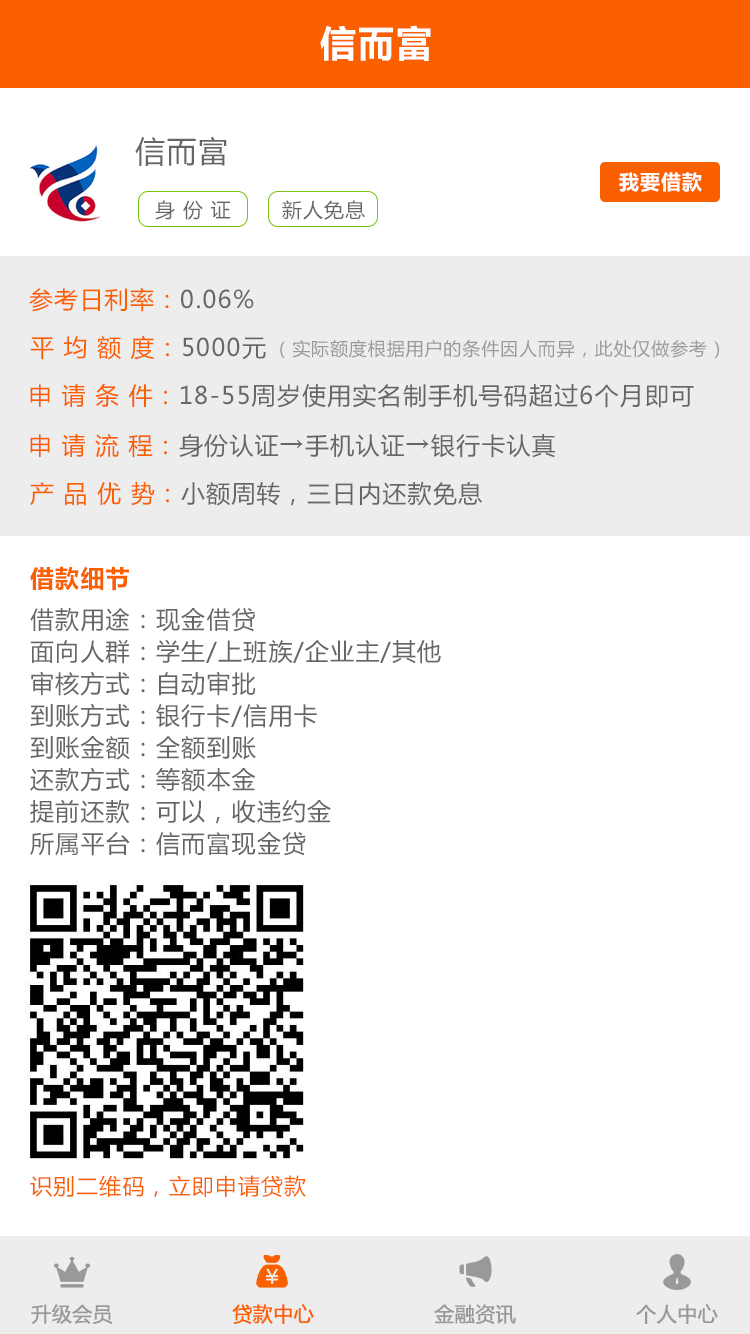
<style>
.page{position:relative;width:750px;height:1334px;background:#ffffff}
.page>*{position:absolute;margin:0}
.t1{font:36px "MicrosoftYaHei-Bold";letter-spacing:0.05em;color:#ffffff}
.t2{font:30px "MicrosoftYaHei";letter-spacing:0.05em;color:#666666}
.t3{font:20px "MicrosoftYaHei-Bold";letter-spacing:0.05em;color:#ffffff}
.t4{font:20px "MicrosoftYaHei";letter-spacing:0.05em;color:#666666}
.t5{font:24px "MicrosoftYaHei";letter-spacing:0.05em;color:#fb6000}
.t6{font:24px "MicrosoftYaHei";letter-spacing:0.05em;color:#666666}
.t7{font:18px "MicrosoftYaHei";letter-spacing:0.05em;color:#999999}
.t8{font:24px "MicrosoftYaHei-Bold";letter-spacing:0.05em;color:#fb6000}
.t9{font:24px/32px "MicrosoftYaHei";letter-spacing:0.05em;color:#666666}
.t10{font:22px "MicrosoftYaHei";letter-spacing:0.05em;color:#fb6000}
.t11{font:20px "MicrosoftYaHei";color:#999999;font-weight:bold}
.t12{font:20px "MicrosoftYaHei";color:#fb6000;font-weight:bold}
</style>
<div class="page">
<p class="t1" style="left:320px;top:25px;width:111px;height:36px">信而富</p>
<p class="t2" style="left:135px;top:136px;width:92px;height:30px">信而富</p>
<p class="t3" style="left:619px;top:172px;width:83px;height:20px">我要借款</p>
<p class="t4" style="left:155px;top:200px;width:76px;height:20px">身 份 证</p>
<p class="t4" style="left:282px;top:200px;width:83px;height:20px">新人免息</p>
<p class="t5" style="left:29px;top:287px;width:225px;height:25px">参考日利率：<span class="t6">0.06%</span></p>
<p class="t5" style="left:30px;top:335px;width:236px;height:25px">平 均 额 度：<span class="t6">5000元</span></p>
<p class="t7" style="left:280px;top:339px;width:439px;height:20px">( 实际额度根据用户的条件因人而异，此处仅做参考 )</p>
<p class="t6" style="left:30px;top:384px;width:664px;height:24px"><span class="t5">申 请 条 件：</span>18-55周岁使用实名制手机号码超过6个月即可</p>
<p class="t6" style="left:30px;top:433px;width:525px;height:25px"><span class="t5">申 请 流 程：</span>身份认证→手机认证→银行卡认真</p>
<p class="t6" style="left:30px;top:481px;width:452px;height:25px"><span class="t5">产 品 优 势：</span>小额周转，三日内还款免息</p>
<p class="t8" style="left:30px;top:566px;width:99px;height:25px">借款细节</p>
<p class="t9" style="left:30px;top:607px;width:411px;height:249px">借款用途：现金借贷<br>面向人群：学生/上班族/企业主/其他<br>审核方式：自动审批<br>到账方式：银行卡/信用卡<br>到账金额：全额到账<br>还款方式：等额本金<br>提前还款：可以，收违约金<br>所属平台：信而富现金贷</p>
<p class="t10" style="left:30px;top:1175px;width:276px;height:22px">识别二维码，立即申请贷款</p>
<p class="t11" style="left:31px;top:1304px;width:82px;height:20px">升级会员</p>
<p class="t12" style="left:232px;top:1304px;width:82px;height:20px">贷款中心</p>
<p class="t11" style="left:434px;top:1304px;width:82px;height:20px">金融资讯</p>
<p class="t11" style="left:636px;top:1304px;width:82px;height:20px">个人中心</p>
</div>
